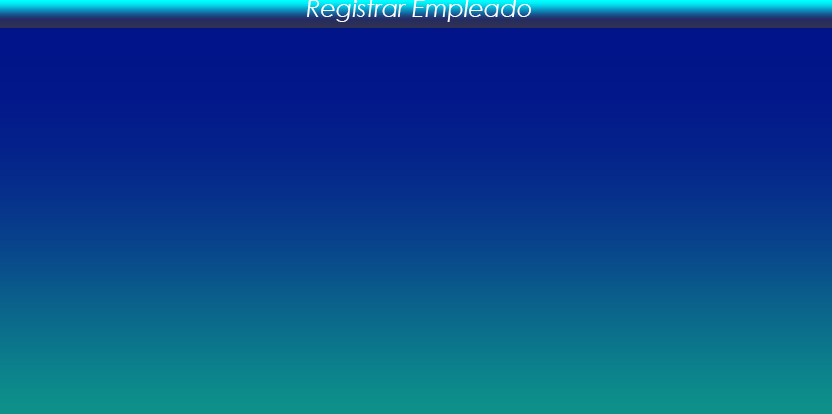
<style>
.page{position:relative;width:832px;height:414px}
.page>*{position:absolute;margin:0}
.t1{font:24px "CenturyGothic-Italic";color:#ffffff}
</style>
<div class="page">
<p class="t1" style="left:307px;top:0px;width:224px;height:22px">Registrar Empleado</p>
</div>
